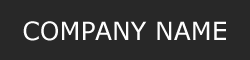
<style>
.page{position:relative;width:250px;height:60px;background:#282828}
.page>*{position:absolute;margin:0}
.t1{font:25px "Verdana";color:#fefefe}
</style>
<div class="page">
<p class="t1" style="left:23px;top:21px;width:203px;height:20px">COMPANY NAME</p>
</div>
